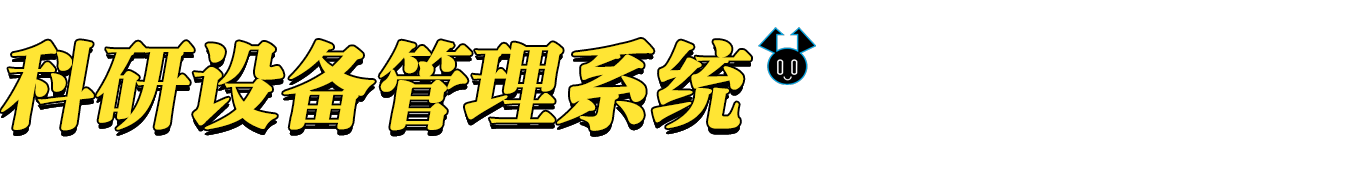
<style>
.page{position:relative;width:1366px;height:170px;background:#ffffff}
.page>*{position:absolute;margin:0}
.t1{font:92px "HGBTS_CNKI";letter-spacing:0.01em;color:#ffe534;font-style:italic}
</style>
<div class="page">
<p class="t1" style="left:1px;top:39px;width:750px;height:92px">科研设备管理系统</p>
</div>
